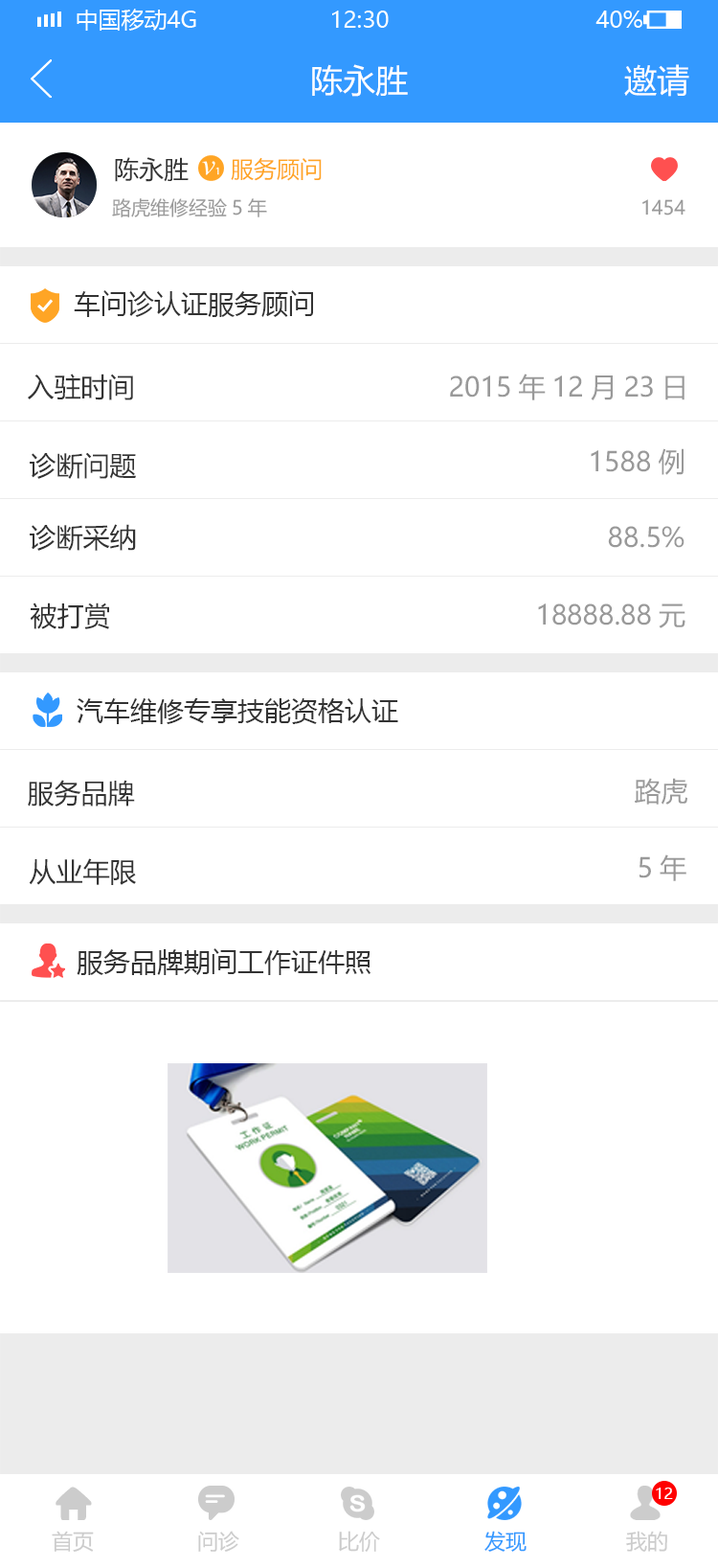
<style>
.page{position:relative;width:718px;height:1568px;background:#ffffff}
.page>*{position:absolute;margin:0}
.t1{font:32.6px "MicrosoftYaHei";color:#ffffff}
.t2{font:24.9px "MicrosoftYaHei";color:#333333}
.t3{font:23px "MicrosoftYaHei";color:#ffa525}
.t4{font:19.2px "MicrosoftYaHei";color:#999999}
.t5{font:26.8px "MicrosoftYaHei";color:#333333}
.t6{font:26.8px "MicrosoftYaHei";color:#999999}
.t7{font:15.3px "MicrosoftYaHei";color:#ffffff}
.t8{font:21.1px "MicrosoftYaHei";color:#cccccc}
.t9{font:21.1px "MicrosoftYaHei";color:#3399ff}
</style>
<div class="page">
<p class="t1" style="left:312px;top:64px;width:96px;height:33px">陈永胜</p>
<p class="t1" style="left:625px;top:64px;width:65px;height:33px">邀请</p>
<p class="t2" style="left:115px;top:157px;width:74px;height:25px">陈永胜</p>
<p class="t3" style="left:231px;top:157px;width:91px;height:24px">服务顾问</p>
<p class="t4" style="left:112px;top:198px;width:155px;height:19px">路虎维修经验5年</p>
<p class="t4" style="left:643px;top:199px;width:43px;height:17px">1454</p>
<p class="t5" style="left:74px;top:290px;width:239px;height:27px">车问诊认证服务顾问</p>
<p class="t5" style="left:28px;top:374px;width:105px;height:26px">入驻时间</p>
<p class="t6" style="left:450px;top:374px;width:235px;height:26px">2015年12月23日</p>
<p class="t6" style="left:591px;top:448px;width:93px;height:27px">1588例</p>
<p class="t5" style="left:30px;top:452px;width:106px;height:27px">诊断问题</p>
<p class="t5" style="left:30px;top:524px;width:106px;height:27px">诊断采纳</p>
<p class="t6" style="left:608px;top:526px;width:77px;height:22px">88.5%</p>
<p class="t5" style="left:31px;top:602px;width:78px;height:27px">被打赏</p>
<p class="t6" style="left:538px;top:603px;width:148px;height:25px">18888.88元</p>
<p class="t5" style="left:77px;top:698px;width:321px;height:26px">汽车维修专享技能资格认证</p>
<p class="t5" style="left:28px;top:780px;width:107px;height:27px">服务品牌</p>
<p class="t6" style="left:635px;top:778px;width:53px;height:27px">路虎</p>
<p class="t6" style="left:640px;top:854px;width:47px;height:27px">5年</p>
<p class="t5" style="left:29px;top:858px;width:107px;height:27px">从业年限</p>
<p class="t5" style="left:77px;top:948px;width:294px;height:27px">服务品牌期间工作证件照</p>
<p class="t7" style="left:656px;top:1488px;width:17px;height:11px">12</p>
<p class="t8" style="left:52px;top:1531px;width:42px;height:21px">首页</p>
<p class="t8" style="left:198px;top:1531px;width:41px;height:21px">问诊</p>
<p class="t8" style="left:339px;top:1531px;width:41px;height:21px">比价</p>
<p class="t9" style="left:485px;top:1531px;width:42px;height:21px">发现</p>
<p class="t8" style="left:626px;top:1531px;width:42px;height:21px">我的</p>
</div>
